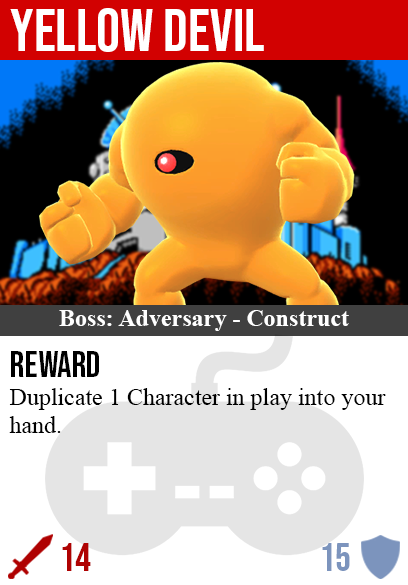
<style>
.page{position:relative;width:408px;height:585px;background:#ffffff}
.page>*{position:absolute;margin:0}
.t1{font:60px "BebasNeue-Regular";color:#ffffff}
.t2{font:24px "TimesNewRomanPS-BoldMT";color:#ffffff}
.t3{font:36px "BebasNeue-Regular";color:#000000}
.t4{font:24px "TimesNewRomanPSMT";color:#000000}
.t5{font:40px "BebasNeue-Regular";color:#af0202}
.t6{font:40px "BebasNeue-Regular";color:#7c94bd}
</style>
<div class="page">
<p class="t1" style="left:10px;top:8px;width:254px;height:44px">yellow devil</p>
<p class="t2" style="left:59px;top:310px;width:290px;height:21px">Boss: Adversary - Construct</p>
<p class="t3" style="left:11px;top:351px;width:88px;height:26px">reward</p>
<p class="t4" style="left:9px;top:388px;width:377px;height:45px">Duplicate 1 Character in play into your<br>hand.</p>
<p class="t5" style="left:62px;top:543px;width:29px;height:28px">14</p>
<p class="t6" style="left:322px;top:543px;width:28px;height:28px">15</p>
</div>
